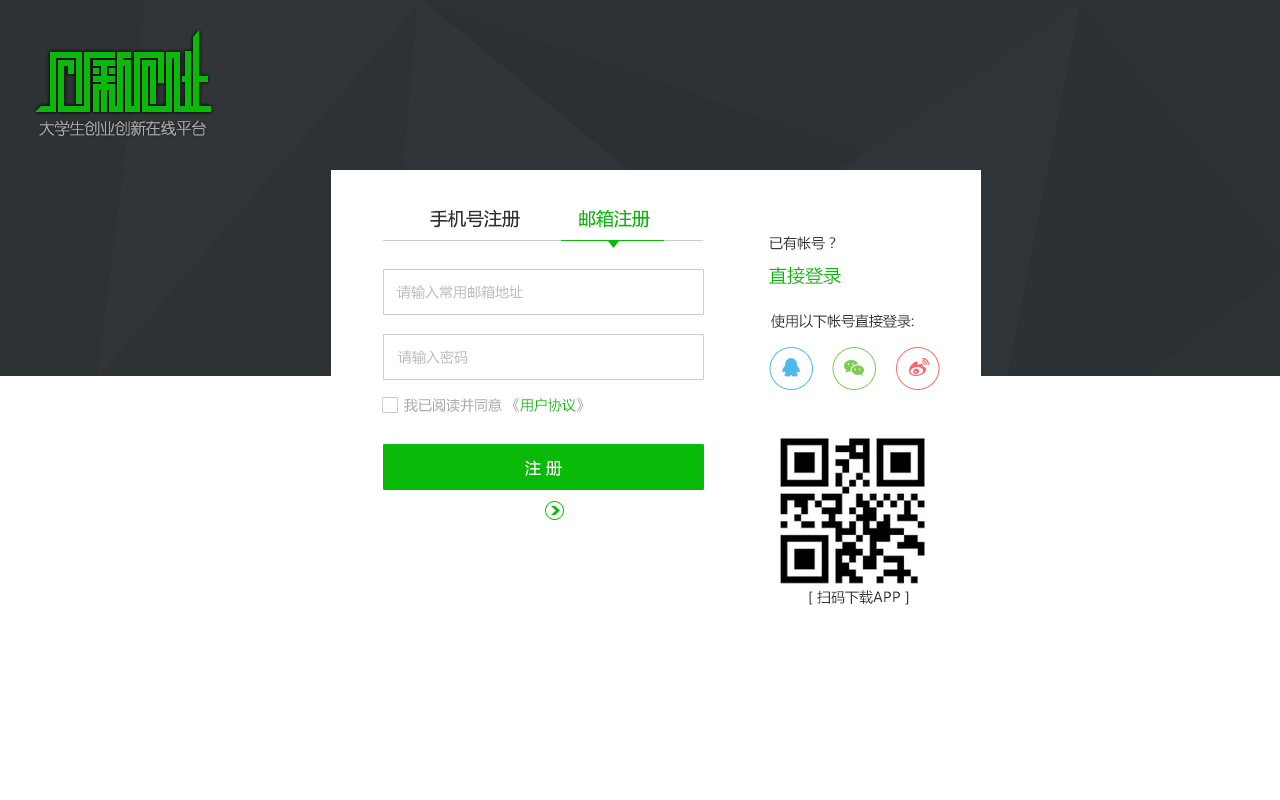
<style>
.page{position:relative;width:1280px;height:800px;background:#ffffff}
.page>*{position:absolute;margin:0}
.t1{font:16px "YouYuan";letter-spacing:-0.05em;color:#adaeaf}
.t2{font:18px "MicrosoftYaHei";color:#333333}
.t3{font:18px "MicrosoftYaHei";color:#09ba08}
.t4{font:14px "MicrosoftYaHei";color:#333333}
.t5{font:14px "MicrosoftYaHei";color:#bbbbbb}
.t6{font:14px "MicrosoftYaHei";color:#aaaaaa}
.t7{font:14px "MicrosoftYaHei";color:#09ba08}
.t8{font:16px "MicrosoftYaHei";color:#ffffff}
</style>
<div class="page">
<p class="t1" style="left:39px;top:120px;width:167px;height:16px">大学生创业创新在线平台</p>
<p class="t2" style="left:430px;top:209px;width:90px;height:19px">手机号注册</p>
<p class="t3" style="left:579px;top:209px;width:71px;height:19px">邮箱注册</p>
<p class="t4" style="left:770px;top:236px;width:66px;height:14px">已有帐号？</p>
<p class="t3" style="left:769px;top:266px;width:72px;height:19px">直接登录</p>
<p class="t5" style="left:397px;top:285px;width:126px;height:14px">请输入常用邮箱地址</p>
<p class="t4" style="left:771px;top:314px;width:143px;height:14px">使用以下帐号直接登录:</p>
<p class="t5" style="left:398px;top:350px;width:70px;height:14px">请输入密码</p>
<p class="t6" style="left:404px;top:398px;width:180px;height:14px">我已阅读并同意 《<span class="t7">用户协议</span>》</p>
<p class="t8" style="left:525px;top:460px;width:37px;height:16px">注 册</p>
<p class="t4" style="left:809px;top:590px;width:100px;height:15px">[ 扫码下载APP ]</p>
</div>
